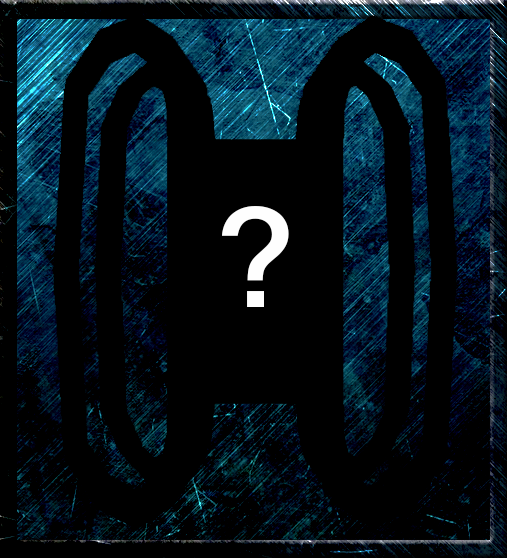
<style>
.page{position:relative;width:507px;height:558px;background:#000000}
.page>*{position:absolute;margin:0}
.t1{font:150px "Shruti-Bold";color:#fefefe}
</style>
<div class="page">
<p class="t1" style="left:222px;top:206px;width:67px;height:101px">?</p>
</div>
